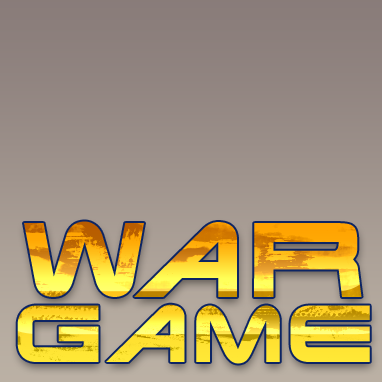
<style>
.page{position:relative;width:382px;height:382px}
.page>*{position:absolute;margin:0}
.t1{font:76.3px/65px "TerminatorRealNFI"}
.t2{font:100px/65px "TerminatorRealNFI"}
</style>
<div class="page">
<p class="t1" style="left:17px;top:221px;width:353px;height:143px;text-align:center"><span class="t2">War<br></span>Game</p>
</div>
